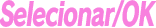
<style>
.page{position:relative;width:156px;height:28px;background:#ffffff}
.page>*{position:absolute;margin:0}
.t1{font:32px "RodinPro-EB";letter-spacing:-0.053em;color:#f880de;font-style:italic;scale:0.71 1}
</style>
<div class="page">
<p class="t1" style="left:0px;top:0px;width:157px;height:27px">Selecionar/OK</p>
</div>
